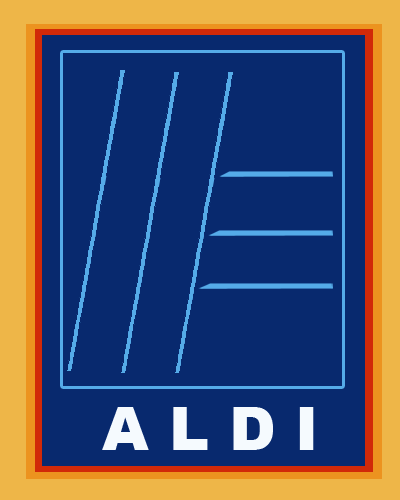
<style>
.page{position:relative;width:400px;height:500px;background:#08296e}
.page>*{position:absolute;margin:0}
.t1{font:60px "Arial-Black";color:#f5fafe}
</style>
<div class="page">
<p class="t1" style="left:102px;top:407px;width:212px;height:43px">A L D I</p>
</div>
